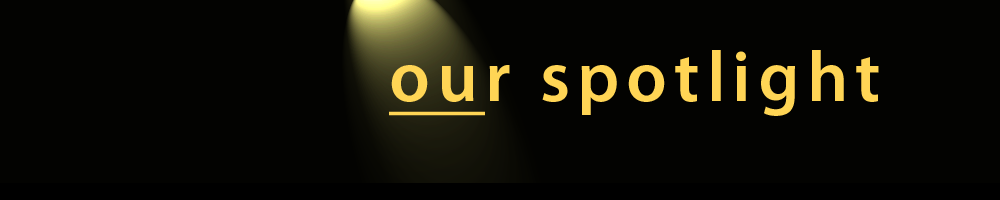
<style>
.page{position:relative;width:1000px;height:200px;background:#030301}
.page>*{position:absolute;margin:0}
.t1{font:72px "MyriadPro-Semibold";letter-spacing:0.1em;color:#ffd555}
.t2{font:72px "MyriadPro-Semibold";letter-spacing:0.1em;color:#ffd555;text-decoration:underline}
</style>
<div class="page">
<p class="t1" style="left:389px;top:50px;width:490px;height:66px"><span class="t2">ou</span>r spotlight</p>
</div>
